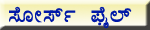
<style>
.page{position:relative;width:150px;height:30px}
.page>*{position:absolute;margin:0}
.t1{font:28px "Kuvempu_Eng_0001";color:#0019a8}
</style>
<div class="page">
<p class="t1" style="left:9px;top:6px;width:123px;height:23px">¸ÉÆÃ¸ïð ¥ÉÊó¯ï</p>
</div>
